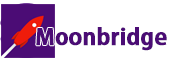
<style>
.page{position:relative;width:171px;height:60px;background:#ffffff}
.page>*{position:absolute;margin:0}
.t1{font:22px "AdobeGothicStd-Bold";color:#4b0c75;font-weight:bold}
</style>
<div class="page">
<p class="t1" style="left:36px;top:27px;width:131px;height:24px">Moonbridge</p>
</div>
